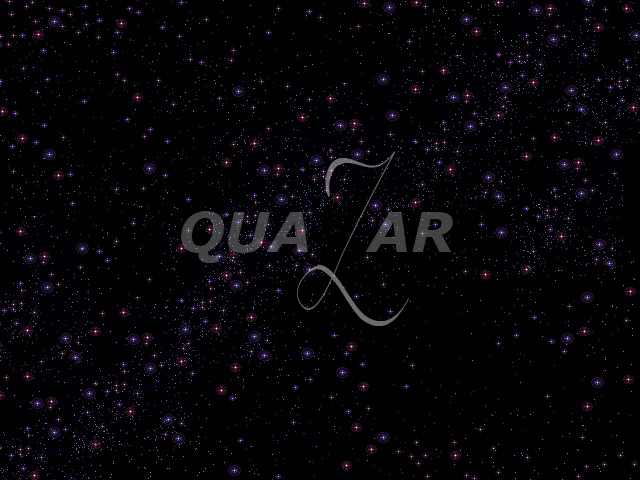
<style>
.page{position:relative;width:640px;height:480px;background:#000000}
.page>*{position:absolute;margin:0}
.t1{font:98.1px "BeforetheRain";color:#6b6b6c;scale:0.47 1}
.t2{font:55px "Verdana-BoldItalic";color:#424243}
</style>
<div class="page">
<p class="t1" style="left:296px;top:151px;width:113px;height:175px;text-align:center">Z</p>
<p class="t2" style="left:181px;top:211px;width:272px;height:52px">QUA   AR</p>
</div>
